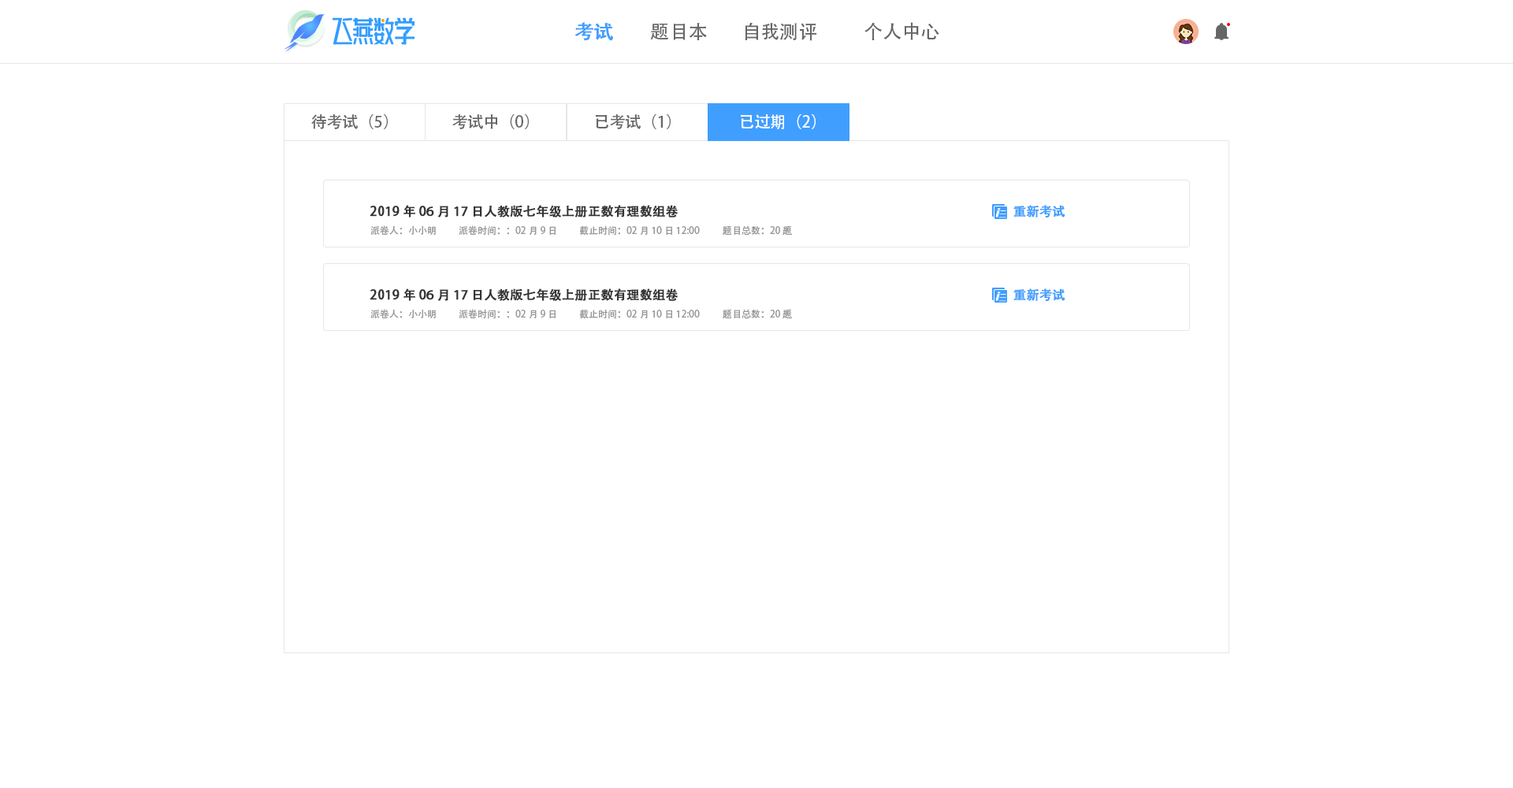
<style>
.page{position:relative;width:1513px;height:788px;background:#ffffff}
.page>*{position:absolute;margin:0}
.t1{font:18.9px "AdobeHeitiStd-Regular";color:#409eff;font-weight:bold}
.t2{font:18.9px "AdobeHeitiStd-Regular";color:#666666}
.t3{font:15.8px "AdobeHeitiStd-Regular";color:#666666}
.t4{font:15.8px "AdobeHeitiStd-Regular";color:#ffffff}
.t5{font:12.6px "AdobeHeitiStd-Regular";color:#333333;font-weight:bold}
.t6{font:12.6px "AdobeHeitiStd-Regular";color:#409eff;font-weight:bold}
.t7{font:9.5px "AdobeHeitiStd-Regular";color:#999999}
</style>
<div class="page">
<p class="t1" style="left:575px;top:22px;width:38px;height:19px">考试</p>
<p class="t2" style="left:650px;top:23px;width:57px;height:17px">题目本</p>
<p class="t2" style="left:745px;top:22px;width:71px;height:19px">自我测评</p>
<p class="t2" style="left:865px;top:22px;width:74px;height:18px">个人中心</p>
<p class="t3" style="left:311px;top:114px;width:77px;height:15px">待考试（5）</p>
<p class="t3" style="left:452px;top:114px;width:77px;height:15px">考试中（0）</p>
<p class="t3" style="left:596px;top:114px;width:75px;height:15px">已考试（1）</p>
<p class="t4" style="left:741px;top:114px;width:75px;height:15px">已过期（2）</p>
<p class="t5" style="left:370px;top:205px;width:309px;height:13px">2019年06月17日人教版七年级上册正数有理数组卷</p>
<p class="t6" style="left:1013px;top:205px;width:52px;height:13px">重新考试</p>
<p class="t7" style="left:370px;top:225px;width:66px;height:10px">派卷人：小小明</p>
<p class="t7" style="left:459px;top:225px;width:97px;height:11px">派卷时间：：02月9日</p>
<p class="t7" style="left:579px;top:225px;width:121px;height:11px">截止时间：02月10日 12:00</p>
<p class="t7" style="left:723px;top:225px;width:70px;height:11px">题目总数：20题</p>
<p class="t5" style="left:370px;top:288px;width:309px;height:13px">2019年06月17日人教版七年级上册正数有理数组卷</p>
<p class="t6" style="left:1013px;top:288px;width:52px;height:14px">重新考试</p>
<p class="t7" style="left:370px;top:309px;width:66px;height:9px">派卷人：小小明</p>
<p class="t7" style="left:459px;top:309px;width:97px;height:10px">派卷时间：：02月9日</p>
<p class="t7" style="left:579px;top:309px;width:121px;height:10px">截止时间：02月10日 12:00</p>
<p class="t7" style="left:723px;top:309px;width:70px;height:10px">题目总数：20题</p>
</div>
